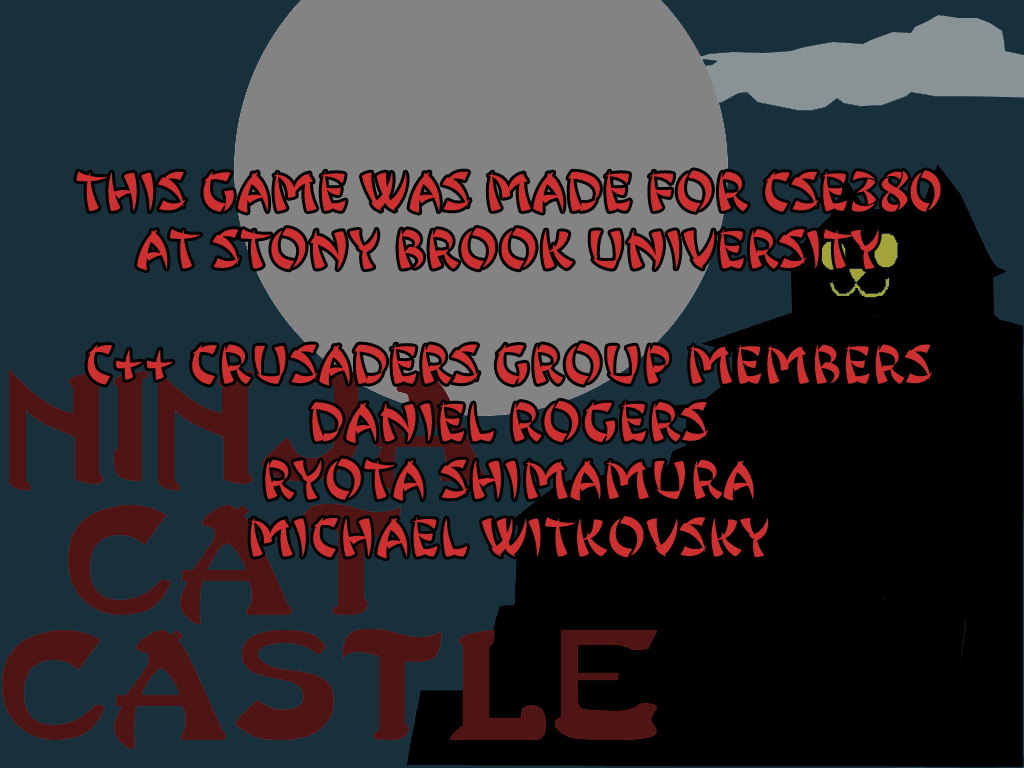
<style>
.page{position:relative;width:1024px;height:768px;background:#18303c}
.page>*{position:absolute;margin:0}
.t1{font:48px "JingJing";color:#cd3030}
</style>
<div class="page">
<p class="t1" style="left:76px;top:170px;width:865px;height:389px;text-align:center">THIS GAME WAS MADE FOR CSE380<br>at STONY BROOK UNIVERSITY<br><br>c++ crusaders group members<br>daniel rogers<br>ryota shimamura<br>michael witkovsky</p>
</div>
